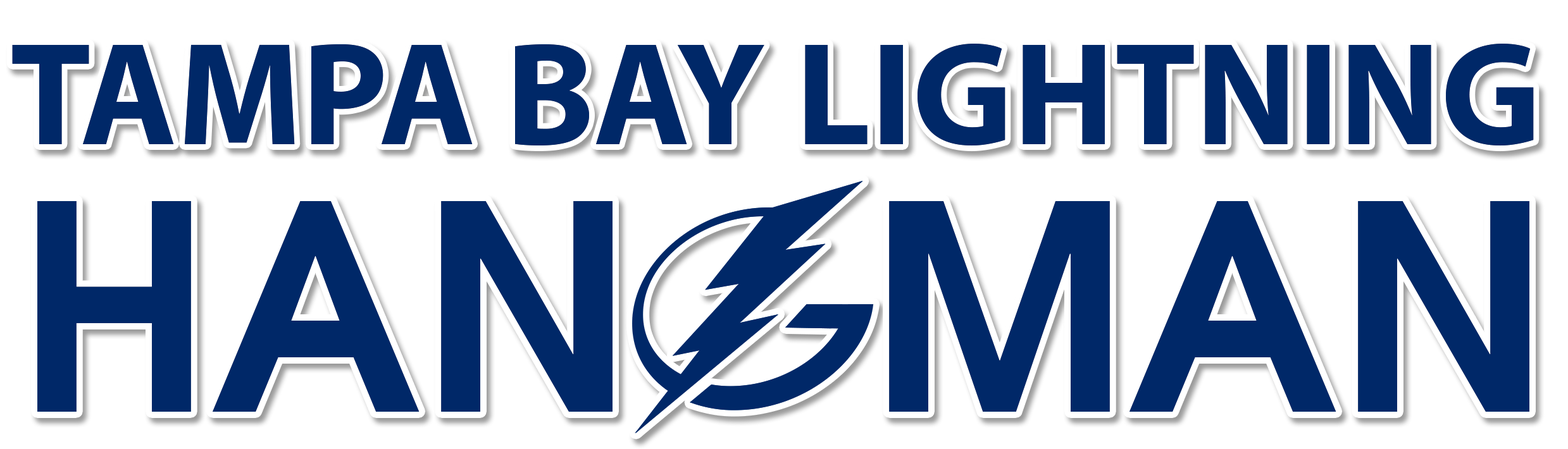
<style>
.page{position:relative;width:1568px;height:449px;background:#ffffff}
.page>*{position:absolute;margin:0}
.t1{font:147.4px "MyriadPro-Bold";color:#002868}
.t2{font:284.7px "AvantGarde-Demi";color:#002868}
</style>
<div class="page">
<p class="t1" style="left:12px;top:44px;width:1522px;height:102px">TAMPA BAY LIGHTNING</p>
<p class="t1" style="left:12px;top:44px;width:1522px;height:102px">TAMPA BAY LIGHTNING</p>
<p class="t2" style="left:37px;top:197px;width:1492px;height:219px">HANGMAN</p>
<p class="t2" style="left:37px;top:197px;width:1492px;height:219px">HANGMAN</p>
</div>
